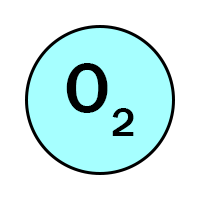
<style>
.page{position:relative;width:200px;height:200px;background:#ffffff}
.page>*{position:absolute;margin:0}
.t1{font:72px "FranklinGothic-Medium";color:#000000}
</style>
<div class="page">
<p class="t1" style="left:66px;top:63px;width:68px;height:73px">O2</p>
</div>
